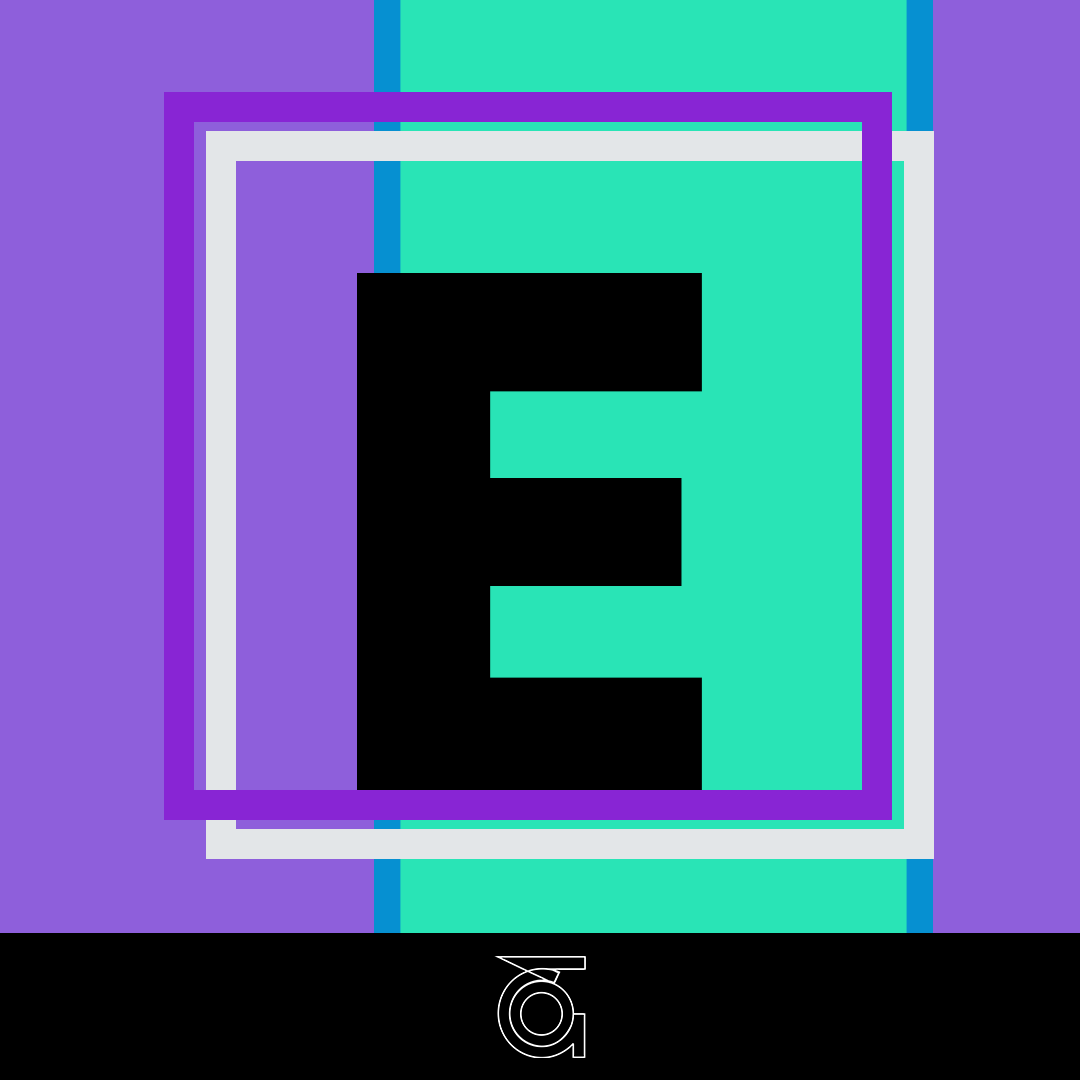
<style>
.page{position:relative;width:1080px;height:1080px;background:#8e5fdb}
.page>*{position:absolute;margin:0}
.t1{font:701px "HeroNew-ExtraBold";color:#000000}
</style>
<div class="page">
<p class="t1" style="left:357px;top:273px;width:345px;height:523px">E</p>
</div>
